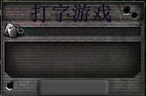
<style>
.page{position:relative;width:146px;height:96px}
.page>*{position:absolute;margin:0}
.t1{font:20px "SimSun";color:#09091e;font-weight:bold}
</style>
<div class="page">
<p class="t1" style="left:31px;top:3px;width:81px;height:20px">打字游戏</p>
</div>
